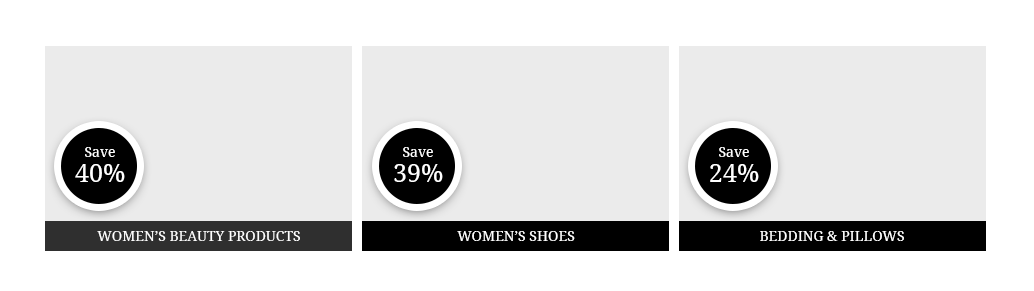
<style>
.page{position:relative;width:1034px;height:291px;background:#ebebeb}
.page>*{position:absolute;margin:0}
.t1{font:14px/26px "DroidSerif";color:#ffffff}
.t2{font:25px/25px "DroidSerif";color:#ffffff}
.t3{font:14px "DroidSerif";color:#ffffff;text-transform:uppercase}
</style>
<div class="page">
<p class="t1" style="left:75px;top:147px;width:50px;height:35px;text-align:center">Save<br><span class="t2">40%</span></p>
<p class="t1" style="left:394px;top:147px;width:49px;height:35px;text-align:center">Save<br><span class="t2">39%</span></p>
<p class="t1" style="left:710px;top:147px;width:49px;height:35px;text-align:center">Save<br><span class="t2">24%</span></p>
<p class="t3" style="left:97px;top:231px;width:203px;height:10px">Women’s Beauty products</p>
<p class="t3" style="left:457px;top:231px;width:118px;height:10px">Women’s shoes</p>
<p class="t3" style="left:760px;top:231px;width:144px;height:10px">bedding &amp; pillows</p>
</div>
